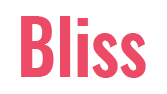
<style>
.page{position:relative;width:167px;height:94px;background:#ffffff}
.page>*{position:absolute;margin:0}
.t1{font:75.2px "Oswald-SemiBold";color:#ed4a67;scale:0.9 1}
</style>
<div class="page">
<p class="t1" style="left:21px;top:16px;width:125px;height:62px">Bliss</p>
</div>
